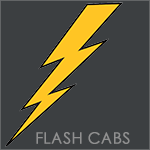
<style>
.page{position:relative;width:150px;height:150px;background:#3c3f41}
.page>*{position:absolute;margin:0}
.t1{font:15.8px "CenturyGothic";color:#909090;font-weight:bold}
</style>
<div class="page">
<p class="t1" style="left:36px;top:132px;width:94px;height:12px">FLASH CABS</p>
</div>
